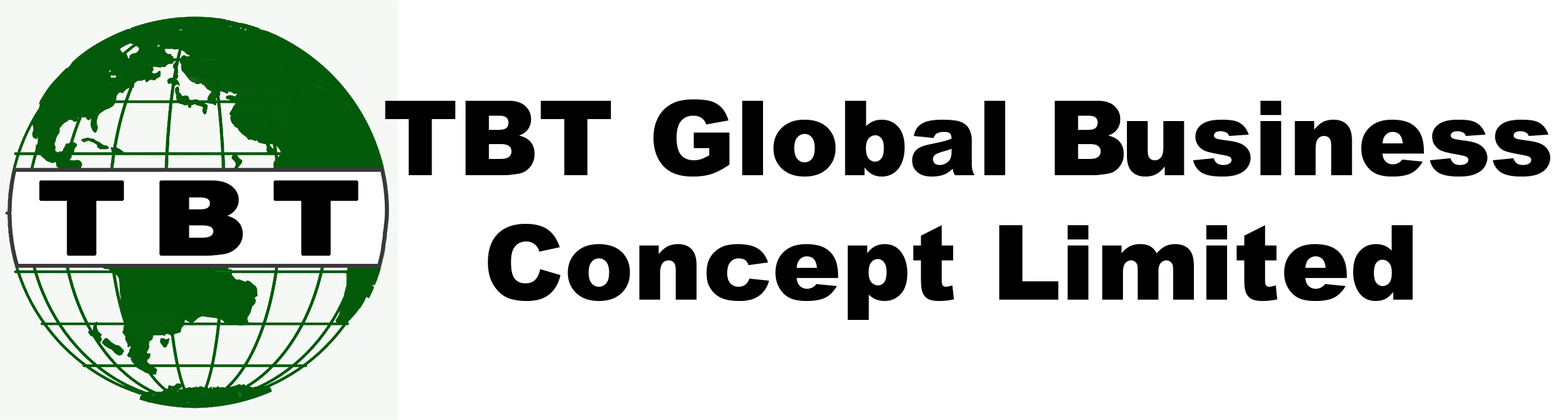
<style>
.page{position:relative;width:1568px;height:420px;background:#ffffff}
.page>*{position:absolute;margin:0}
.t1{font:103.9px "Arial-Black";color:#000000}
</style>
<div class="page">
<p class="t1" style="left:385px;top:99px;width:1165px;height:221px;text-align:center">TBT Global Business<br>Concept Limited</p>
</div>
